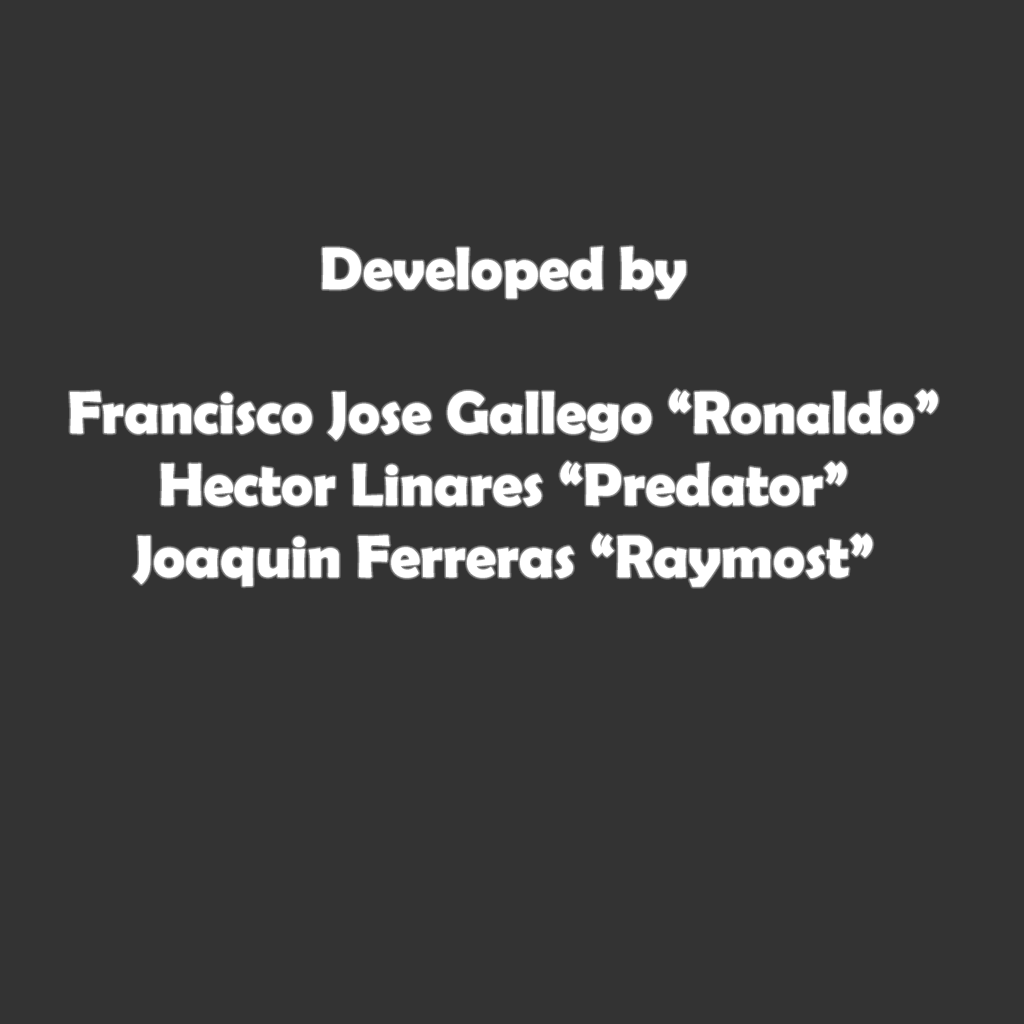
<style>
.page{position:relative;width:1024px;height:1024px;background:#333333}
.page>*{position:absolute;margin:0}
.t1{font:60px "BerlinSansFBDemi-Bold";color:#ffffff}
</style>
<div class="page">
<p class="t1" style="left:70px;top:246px;width:868px;height:341px;text-align:center">Developed by<br><br>Francisco Jose Gallego “Ronaldo”<br>Hector Linares “Predator”<br>Joaquin Ferreras “Raymost”</p>
</div>
